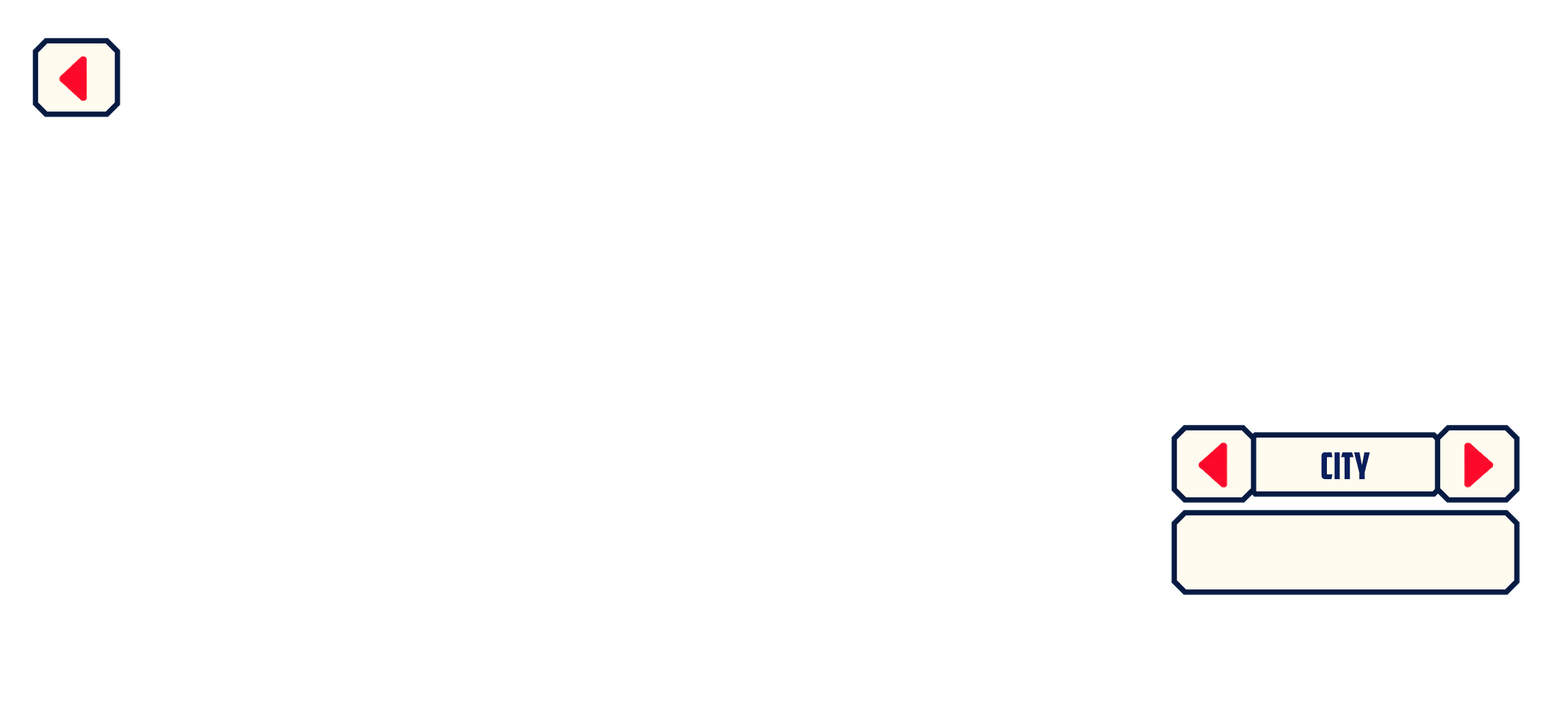
<style>
.page{position:relative;width:1568px;height:706px;background:#ffffff}
.page>*{position:absolute;margin:0}
.t1{font:36.6px "AmericanCaptain";color:#0a1f5c}
</style>
<div class="page">
<p class="t1" style="left:1321px;top:452px;width:49px;height:27px">CITY</p>
</div>
